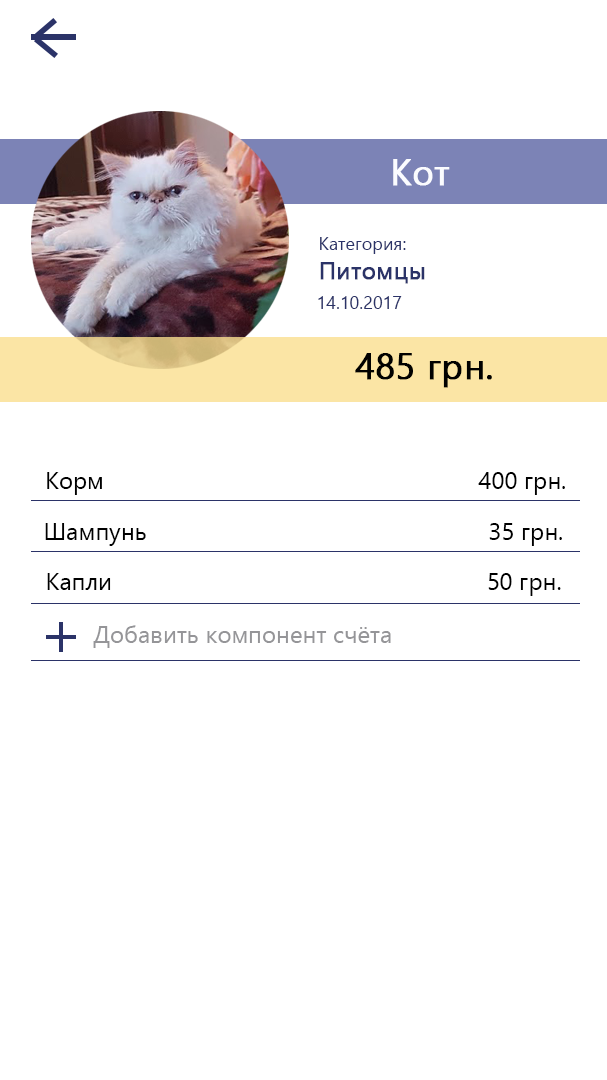
<style>
.page{position:relative;width:607px;height:1080px;background:#ffffff}
.page>*{position:absolute;margin:0}
.t1{font:36px "YuGothicUI-Regular";color:#fbfcff;font-weight:bold}
.t2{font:18px "YuGothicUI-Regular";color:#2b3368}
.t3{font:24px "YuGothicUI-Regular";color:#2b3368;font-weight:bold}
.t4{font:36px "YuGothicUI-Regular";color:#010100;font-weight:bold}
.t5{font:24px "YuGothicUI-Regular";color:#000000}
.t6{font:24px "YuGothicUI-Regular";color:#959598}
</style>
<div class="page">
<p class="t1" style="left:393px;top:159px;width:57px;height:27px">Кот</p>
<p class="t2" style="left:320px;top:237px;width:105px;height:47px">Категория:<br><span class="t3">Питомцы</span></p>
<p class="t2" style="left:318px;top:296px;width:84px;height:13px">14.10.2017</p>
<p class="t4" style="left:355px;top:353px;width:137px;height:35px">485 грн.</p>
<p class="t5" style="left:47px;top:472px;width:518px;height:23px">Корм                                                         400 грн.</p>
<p class="t5" style="left:45px;top:523px;width:517px;height:23px">Шампунь                                                    35 грн.</p>
<p class="t5" style="left:47px;top:573px;width:514px;height:23px">Капли                                                         50 грн.</p>
<p class="t6" style="left:93px;top:625px;width:298px;height:23px">Добавить компонент счёта</p>
</div>
